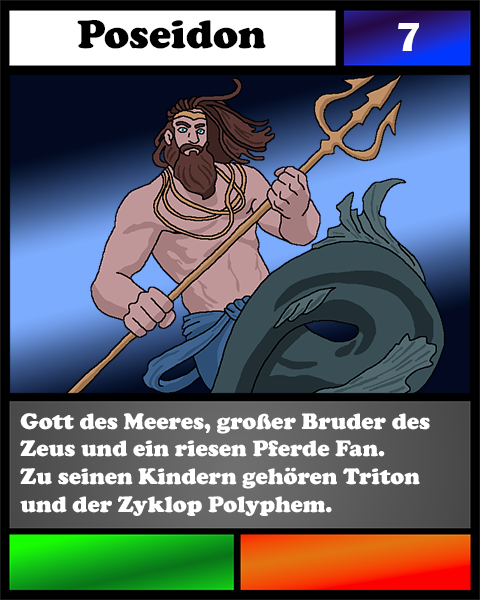
<style>
.page{position:relative;width:480px;height:600px}
.page>*{position:absolute;margin:0}
.t1{font:41.7px "CooperBlack";color:#000000}
.t2{font:41.7px "BritannicBold";color:#ffffff}
.t3{font:23.1px "CooperBlack";color:#ffffff}
</style>
<div class="page">
<p class="t1" style="left:77px;top:20px;width:189px;height:29px">Poseidon</p>
<p class="t2" style="left:398px;top:23px;width:21px;height:28px">7</p>
<p class="t3" style="left:20px;top:413px;width:410px;height:103px">Gott des Meeres, großer Bruder des <br>Zeus und ein riesen Pferde Fan.<br>Zu seinen Kindern gehören Triton<br>und der Zyklop Polyphem.</p>
</div>
